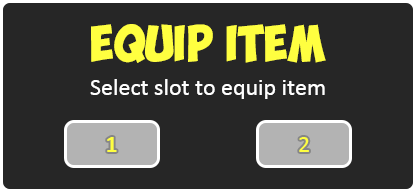
<style>
.page{position:relative;width:416px;height:192px;background:#262626}
.page>*{position:absolute;margin:0}
.t1{font:36px "ObelixPro";color:#ffff40}
.t2{font:24px "Calibri";color:#ffffff}
.t3{font:24px "Calibri-Bold";color:#ffff40}
.t4{font:24px "Calibri";color:#ffff40}
</style>
<div class="page">
<p class="t1" style="left:91px;top:24px;width:235px;height:39px">EQUIP ITEM</p>
<p class="t2" style="left:90px;top:79px;width:235px;height:20px">Select slot to equip item</p>
<p class="t3" style="left:107px;top:137px;width:10px;height:15px">1</p>
<p class="t4" style="left:299px;top:137px;width:10px;height:15px">2</p>
</div>
